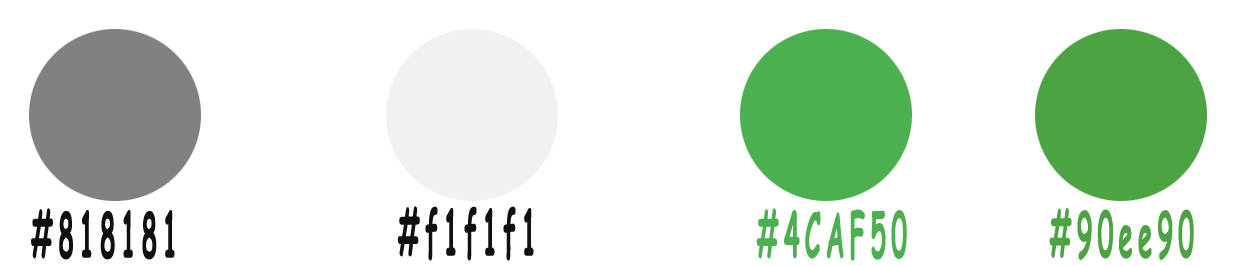
<style>
.page{position:relative;width:1240px;height:266px;background:#ffffff}
.page>*{position:absolute;margin:0}
.t1{font:62.5px "ComicSansMS-Bold";letter-spacing:0.2em;color:#101010;scale:0.41 1}
.t2{font:62.5px "ComicSansMS-Bold";letter-spacing:0.2em;color:#4caf50;scale:0.41 1}
.t3{font:62.5px "ComicSansMS-Bold";letter-spacing:0.2em;color:#4ca341;scale:0.41 1}
</style>
<div class="page">
<p class="t1" style="left:31px;top:208px;width:144px;height:52px">#818181</p>
<p class="t1" style="left:397px;top:206px;width:137px;height:55px">#f1f1f1</p>
<p class="t2" style="left:756px;top:208px;width:151px;height:53px">#4CAF50</p>
<p class="t3" style="left:1049px;top:207px;width:145px;height:54px">#90ee90</p>
</div>
